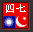
<style>
.page{position:relative;width:33px;height:32px;background:#333333}
.page>*{position:absolute;margin:0}
.t1{font:10.4px "SimSun";color:#ffffff}
</style>
<div class="page">
<p class="t1" style="left:6px;top:4px;width:20px;height:9px">四七</p>
</div>
